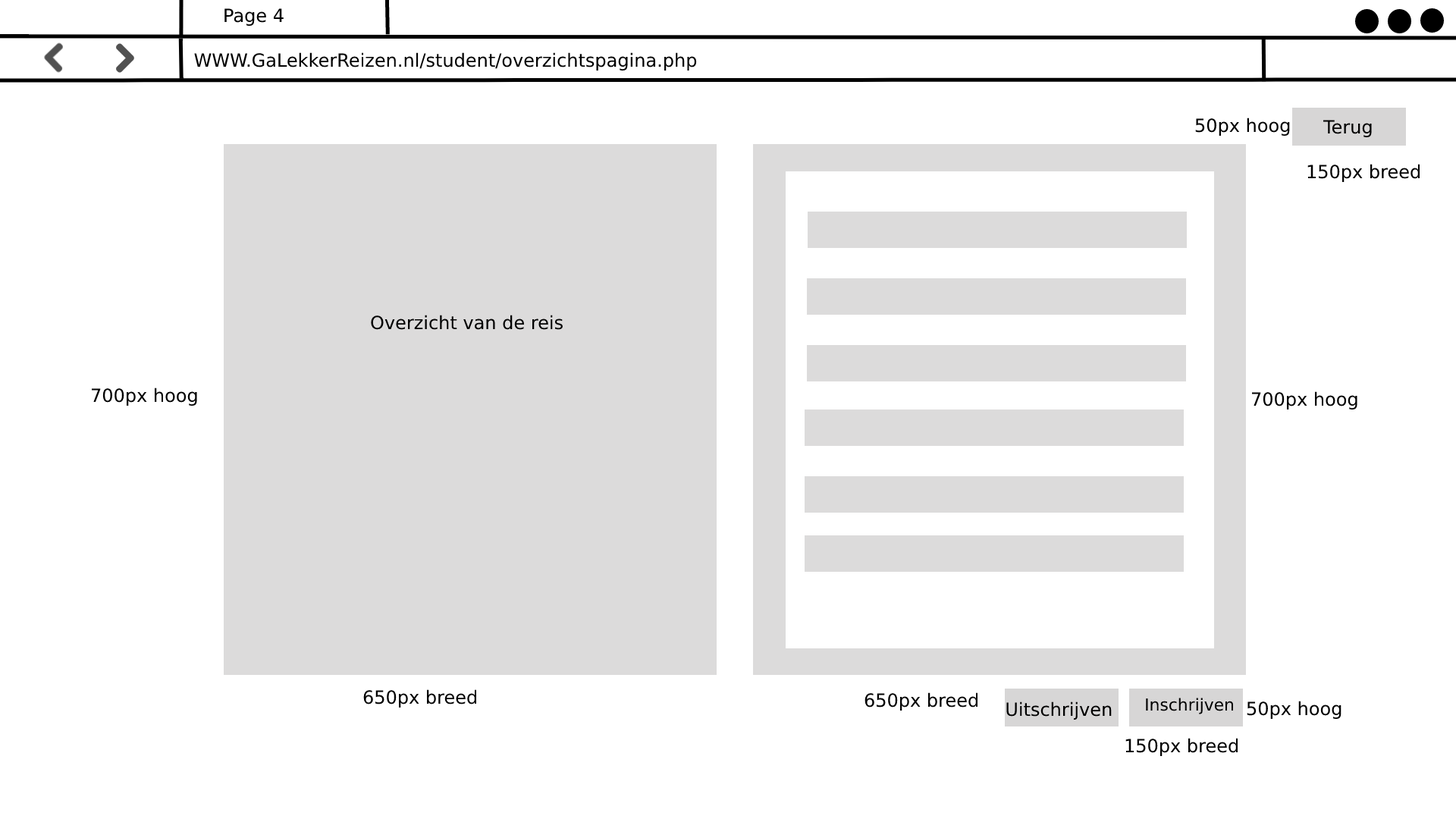
<style>
.page{position:relative;width:1456px;height:819px;background:#ffffff}
.page>*{position:absolute;margin:0}
.t1{font:18.2px "DejaVuSans";color:#000000}
.t2{font:16.5px "DejaVuSans";color:#000000}
</style>
<div class="page">
<p class="t1" style="left:224px;top:8px;width:60px;height:18px">Page 4</p>
<p class="t1" style="left:194px;top:52px;width:503px;height:19px">WWW.GaLekkerReizen.nl/student/overzichtspagina.php</p>
<p class="t1" style="left:1195px;top:118px;width:95px;height:18px">50px hoog</p>
<p class="t1" style="left:1323px;top:120px;width:49px;height:17px">Terug</p>
<p class="t1" style="left:1307px;top:164px;width:113px;height:18px">150px breed</p>
<p class="t1" style="left:371px;top:315px;width:192px;height:15px">Overzicht van de reis</p>
<p class="t1" style="left:91px;top:388px;width:106px;height:18px">700px hoog</p>
<p class="t1" style="left:1252px;top:391px;width:105px;height:18px">700px hoog</p>
<p class="t1" style="left:363px;top:689px;width:114px;height:19px">650px breed</p>
<p class="t1" style="left:864px;top:692px;width:113px;height:19px">650px breed</p>
<p class="t1" style="left:1006px;top:701px;width:106px;height:19px">Uitschrijven</p>
<p class="t2" style="left:1146px;top:698px;width:88px;height:16px">Inschrijven</p>
<p class="t1" style="left:1247px;top:701px;width:94px;height:18px">50px hoog</p>
<p class="t1" style="left:1125px;top:738px;width:113px;height:18px">150px breed</p>
</div>
